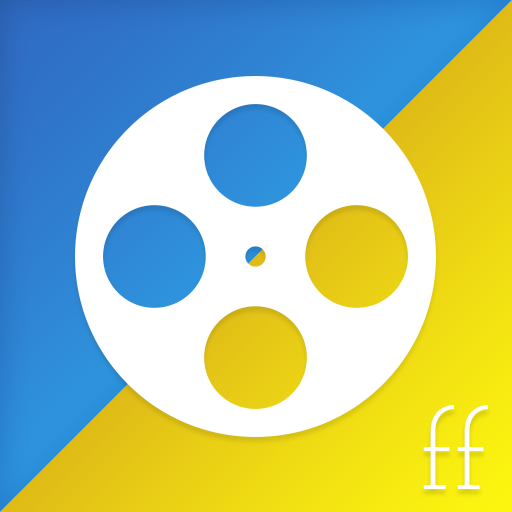
<style>
.page{position:relative;width:512px;height:512px;background:#ffffff}
.page>*{position:absolute;margin:0}
.t1{font:112.3px "JosefinSlab";color:#ffffff}
</style>
<div class="page">
<p class="t1" style="left:423px;top:405px;width:65px;height:84px">ff</p>
</div>
